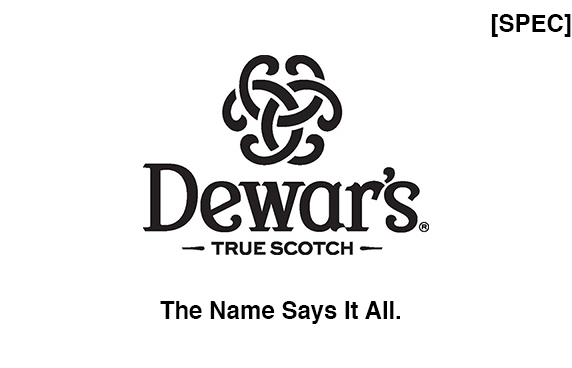
<style>
.page{position:relative;width:572px;height:368px;background:#ffffff}
.page>*{position:absolute;margin:0}
.t1{font:24px "Helvetica-Bold";color:#000000}
</style>
<div class="page">
<p class="t1" style="left:491px;top:14px;width:80px;height:23px">[SPEC]</p>
<p class="t1" style="left:160px;top:301px;width:240px;height:23px">The Name Says It All.</p>
</div>
